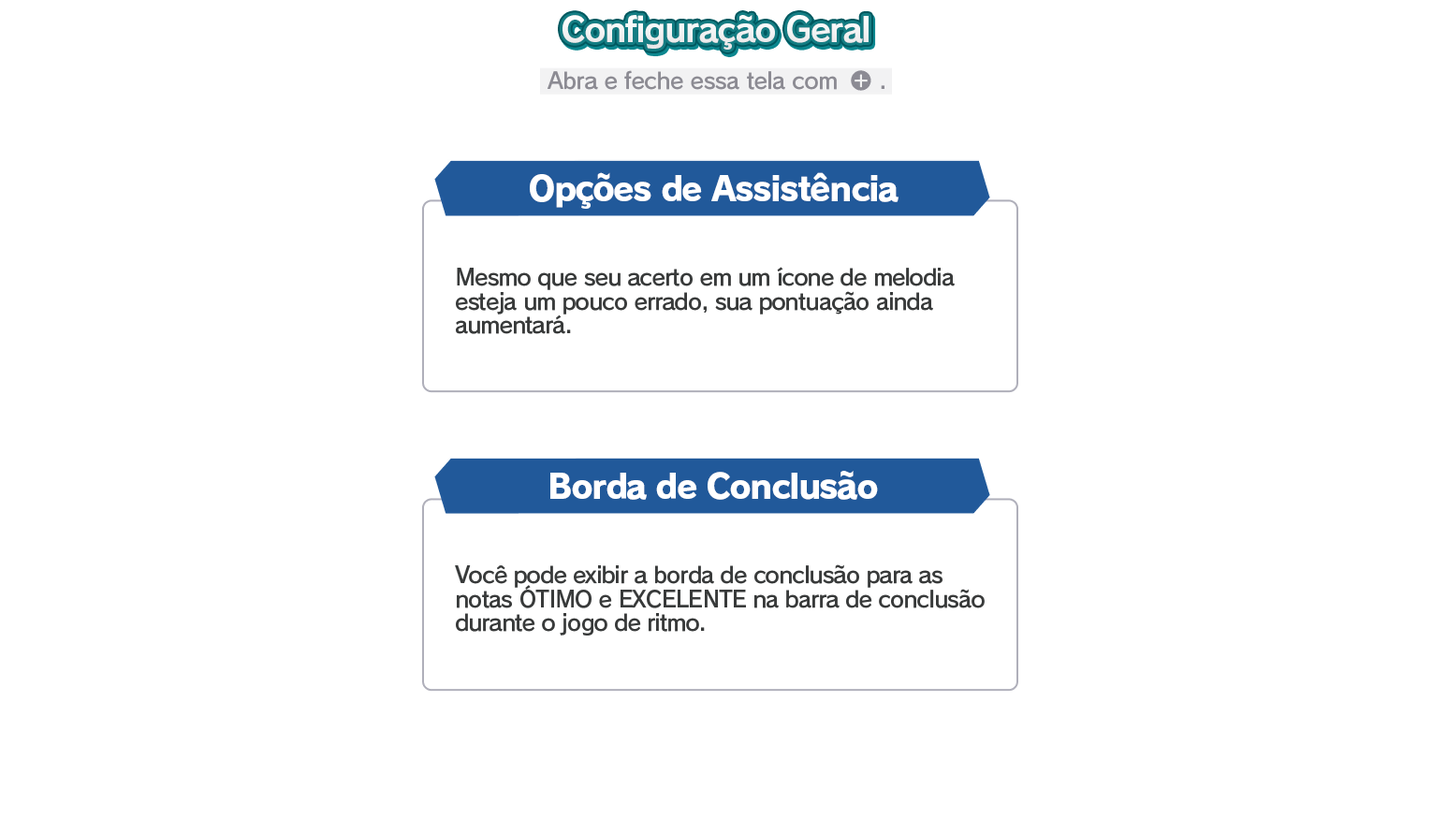
<style>
.page{position:relative;width:1432px;height:833px;background:#ffffff}
.page>*{position:absolute;margin:0}
.t1{font:33.7px "RodinPro-B";letter-spacing:-0.039em;color:#f2f3f3}
.t2{font:22.5px "RodinPro-DB";letter-spacing:-0.025em;color:#8c8b93}
.t3{font:33.7px "RodinPro-EB";letter-spacing:-0.048em;color:#ffffff}
.t4{font:22.5px/23.7px "RodinPro-DB";letter-spacing:-0.04em;color:#383a3a}
</style>
<div class="page">
<p class="t1" style="left:562px;top:15px;width:306px;height:35px">Configuração Geral</p>
<p class="t2" style="left:547px;top:70px;width:290px;height:20px">Abra e feche essa tela com</p>
<p class="t2" style="left:881px;top:85px;width:3px;height:4px">.</p>
<p class="t3" style="left:530px;top:172px;width:368px;height:37px">Opções de Assistência</p>
<p class="t4" style="left:456px;top:267px;width:499px;height:67px">Mesmo que seu acerto em um ícone de melodia<br>esteja um pouco errado, sua pontuação ainda<br>aumentará.</p>
<p class="t3" style="left:550px;top:471px;width:328px;height:29px">Borda de Conclusão</p>
<p class="t4" style="left:455px;top:564px;width:529px;height:71px">Você pode exibir a borda de conclusão para as<br>notas ÓTIMO e EXCELENTE na barra de conclusão<br>durante o jogo de ritmo.</p>
</div>
